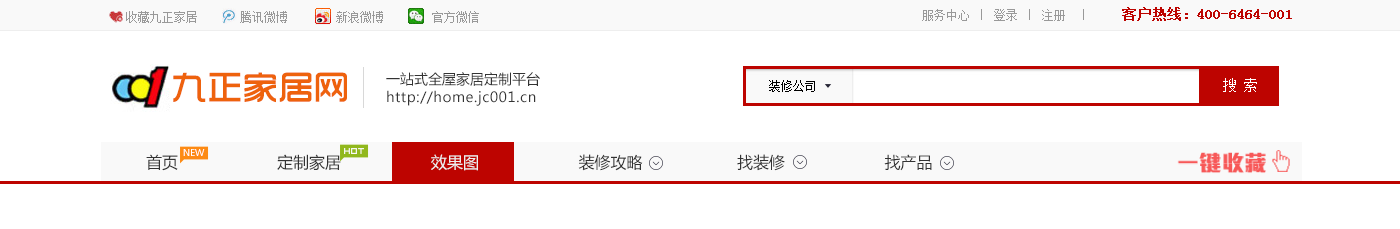
<style>
.page{position:relative;width:1400px;height:229px;background:#ffffff}
.page>*{position:absolute;margin:0}
.t1{font:12px "NSimSun";color:#999999}
.t2{font:14px "NSimSun";color:#bd0400;font-weight:bold}
.t3{font:34.7px "TRENDS";color:#ee620d;font-weight:bold}
.t4{font:14px "MicrosoftYaHei";color:#333333}
.t5{font:12px "NSimSun";color:#000000}
.t6{font:14px "MicrosoftYaHei";letter-spacing:0.04em;color:#333333}
.t7{font:9px "MicrosoftYaHei";color:#ffffff}
.t8{font:16px "MicrosoftYaHei";color:#333333}
.t9{font:16px "MicrosoftYaHei";color:#efefef}
</style>
<div class="page">
<p class="t1" style="left:126px;top:11px;width:353px;height:12px">收藏九正家居       腾讯微博        新浪微博        官方微信</p>
<p class="t1" style="left:922px;top:7px;width:370px;height:14px">服务中心 ｜ 登录 ｜ 注册  ｜     <span class="t2">客户热线：400-6464-001</span></p>
<p class="t3" style="left:173px;top:72px;width:174px;height:31px">九正家居网</p>
<p class="t4" style="left:386px;top:72px;width:154px;height:14px">一站式全屋家居定制平台</p>
<p class="t5" style="left:769px;top:80px;width:46px;height:12px">装修公司</p>
<p class="t6" style="left:387px;top:90px;width:149px;height:16px">http://home.jc001.cn</p>
<p class="t7" style="left:183px;top:149px;width:22px;height:7px">NEW</p>
<p class="t8" style="left:146px;top:154px;width:32px;height:17px">首页</p>
<p class="t8" style="left:277px;top:154px;width:655px;height:17px">定制家居                  <span class="t9"> 效果图</span>                     装修攻略                    找装修                     找产品</p>
</div>
